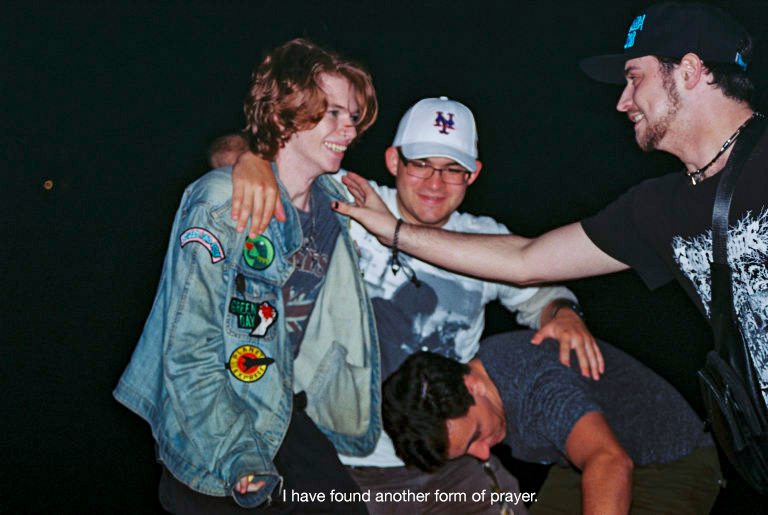
<style>
.page{position:relative;width:768px;height:515px}
.page>*{position:absolute;margin:0}
.t1{font:16px "HelveticaNeue";color:#ffffff}
</style>
<div class="page">
<p class="t1" style="left:283px;top:489px;width:254px;height:16px">I have found another form of prayer.</p>
</div>
